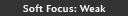
<style>
.page{position:relative;width:128px;height:16px;background:#333333}
.page>*{position:absolute;margin:0}
.t1{font:10px "AmiraParadiso";letter-spacing:0.05em;color:#ffffff}
</style>
<div class="page">
<p class="t1" style="left:23px;top:4px;width:83px;height:8px">Soft Focus: Weak</p>
</div>
